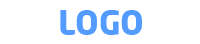
<style>
.page{position:relative;width:200px;height:44px;background:#ffffff}
.page>*{position:absolute;margin:0}
.t1{font:33px "NeoSans-Bold";color:#539bff;text-transform:uppercase}
</style>
<div class="page">
<p class="t1" style="left:60px;top:10px;width:82px;height:25px">logo</p>
</div>
